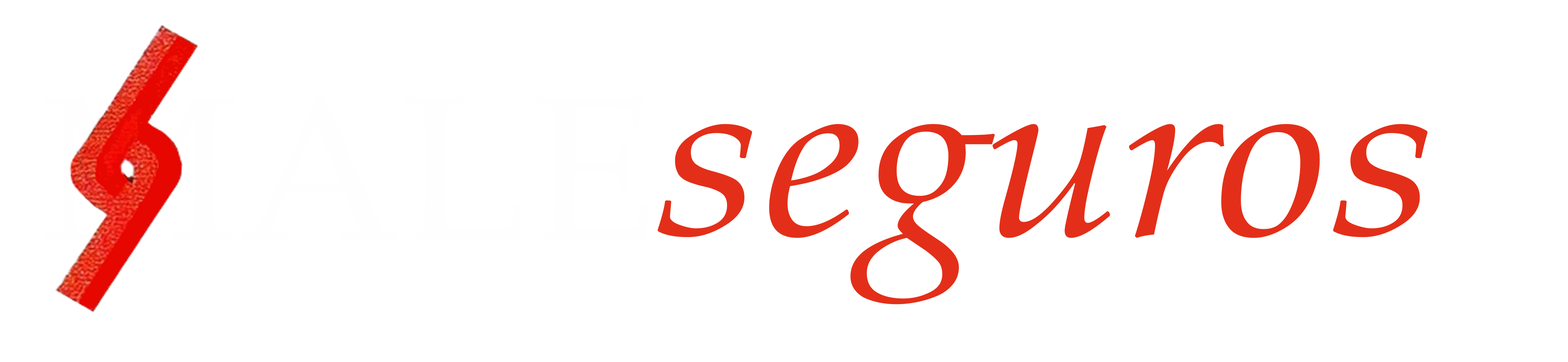
<style>
.page{position:relative;width:1568px;height:362px;background:#ffffff}
.page>*{position:absolute;margin:0}
.t1{font:236.8px "PalatinoNova-Italic";color:#e32f19;scale:1.08 1}
</style>
<div class="page">
<p class="t1" style="left:658px;top:124px;width:770px;height:180px">seguros</p>
</div>
